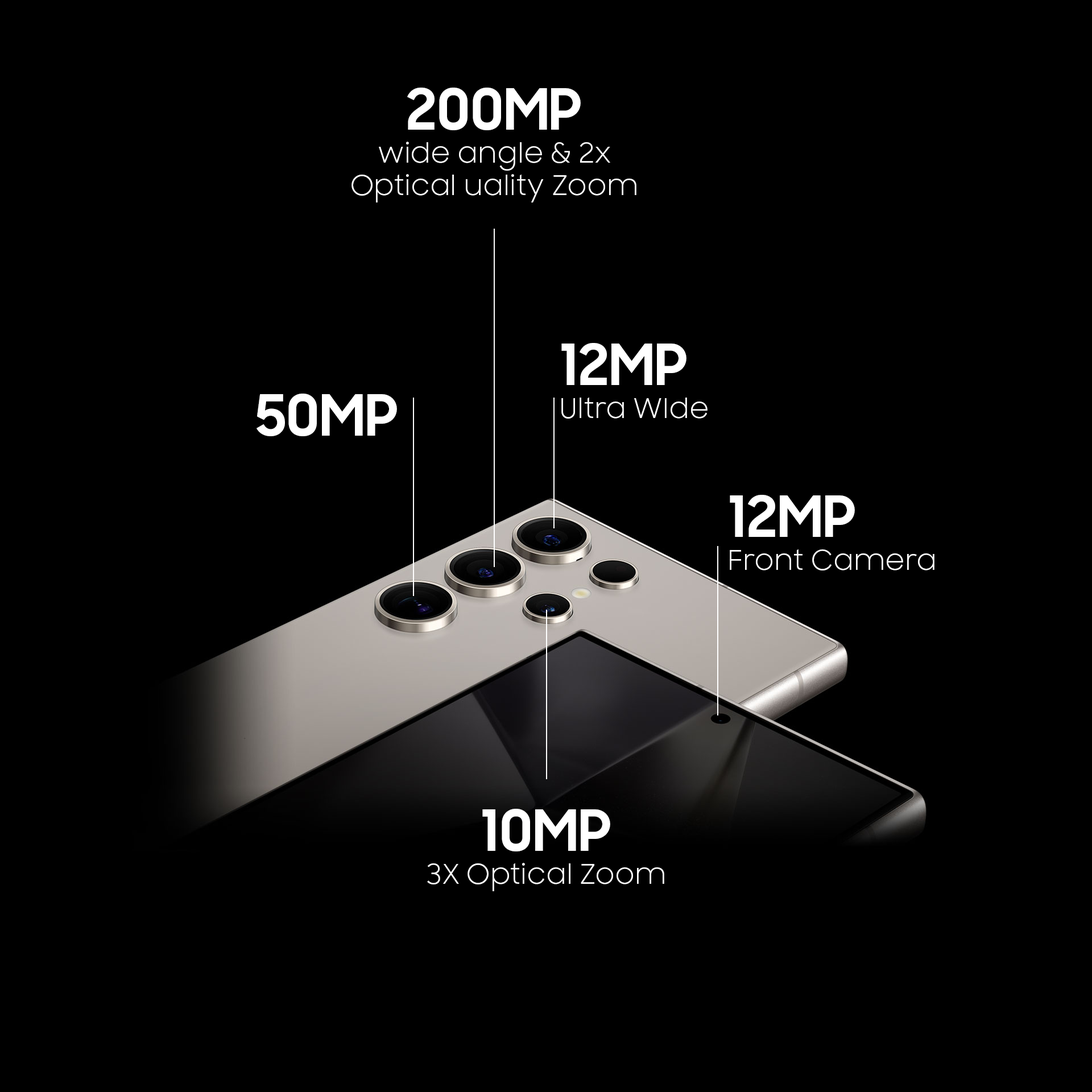
<style>
.page{position:relative;width:1092px;height:1092px;background:#000000}
.page>*{position:absolute;margin:0}
.t1{font:27.3px "SamsungSharpSans";color:#ffffff}
.t2{font:56.9px "SamsungSharpSans-Bold";color:#ffffff}
</style>
<div class="page">
<p class="t1" style="left:351px;top:88px;width:285px;height:114px;text-align:center"><span class="t2">200MP<br></span>wide angle &amp; 2x <br>Optical uality Zoom</p>
<p class="t1" style="left:561px;top:343px;width:147px;height:76px"><span class="t2">12MP<br></span>Ultra WIde</p>
<p class="t2" style="left:257px;top:394px;width:140px;height:42px">50MP</p>
<p class="t1" style="left:730px;top:495px;width:204px;height:75px"><span class="t2">12MP<br></span>Front Camera</p>
<p class="t1" style="left:427px;top:809px;width:237px;height:82px;text-align:center"><span class="t2">10MP<br></span>3X Optical Zoom</p>
</div>
